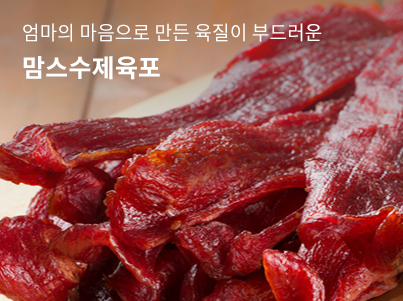
<style>
.page{position:relative;width:403px;height:301px}
.page>*{position:absolute;margin:0}
.t1{font:20px/37px "NotoSansCJKkr-Regular";letter-spacing:0.01em;color:#ffffff;scale:0.95 1}
.t2{font:25px/37px "NotoSansCJKkr-Bold";letter-spacing:0.01em;color:#ffffff}
</style>
<div class="page">
<p class="t1" style="left:23px;top:23px;width:299px;height:57px">엄마의 마음으로 만든 육질이 부드러운<br><span class="t2">맘스수제육포</span></p>
</div>
